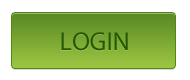
<style>
.page{position:relative;width:190px;height:80px;background:#ffffff}
.page>*{position:absolute;margin:0}
.t1{font:26px "MyriadPro-Regular";color:#235900}
.t2{font:20px "MyriadPro-Regular";color:#235900}
</style>
<div class="page">
<p class="t1" style="left:61px;top:32px;width:67px;height:19px"><span class="t2">  </span>    LOGIN</p>
</div>
